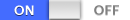
<style>
.page{position:relative;width:130px;height:20px;background:#ffffff}
.page>*{position:absolute;margin:0}
.t1{font:13px "LucidaGrande-Bold";color:#ffffff}
.t2{font:13px "LucidaGrande-Bold";color:#808080}
</style>
<div class="page">
<p class="t1" style="left:14px;top:5px;width:20px;height:10px">ON</p>
<p class="t2" style="left:94px;top:5px;width:25px;height:10px">OFF</p>
</div>
